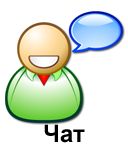
<style>
.page{position:relative;width:128px;height:150px;background:#ffffff}
.page>*{position:absolute;margin:0}
.t1{font:24px "Arial-BoldMT";color:#000000}
</style>
<div class="page">
<p class="t1" style="left:44px;top:124px;width:41px;height:19px">Чат</p>
</div>
